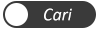
<style>
.page{position:relative;width:100px;height:30px;background:#3a3a3a}
.page>*{position:absolute;margin:0}
.t1{font:18px "Calibri-Italic";color:#ffffff}
</style>
<div class="page">
<p class="t1" style="left:44px;top:8px;width:28px;height:13px">Cari</p>
</div>
